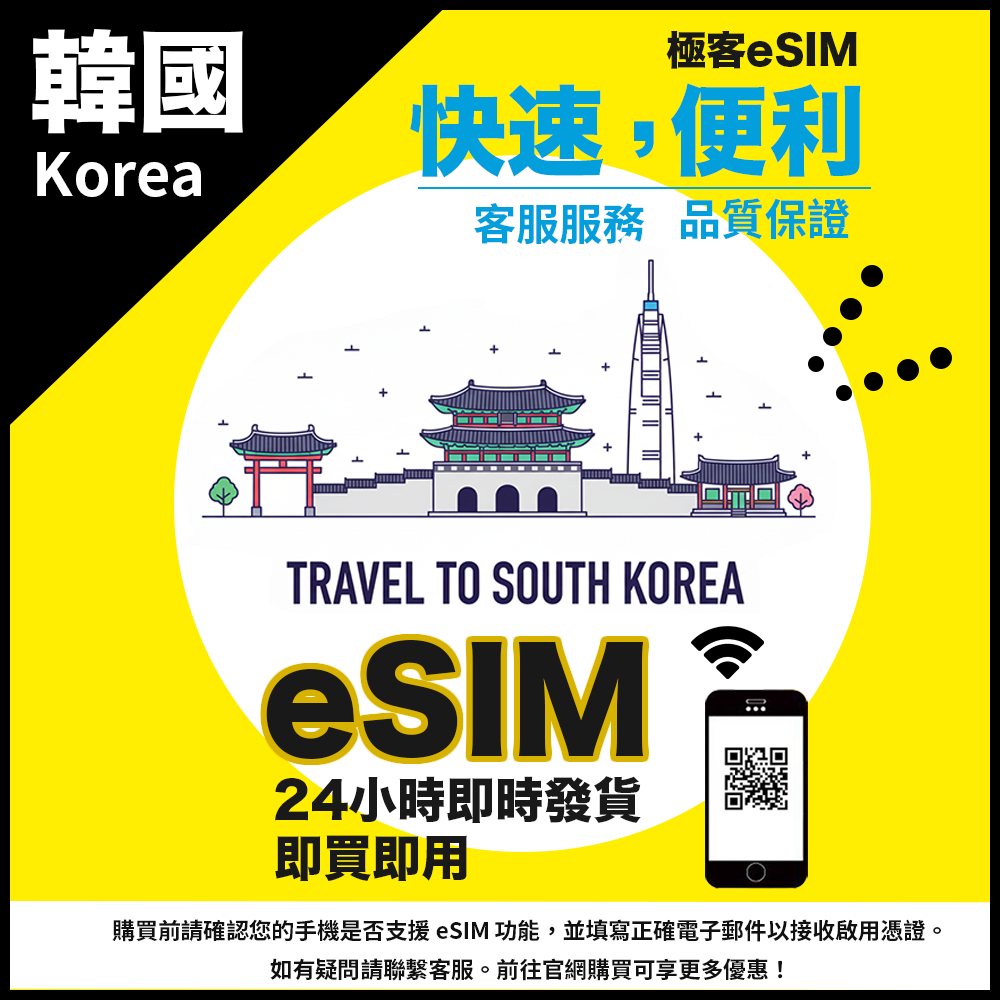
<style>
.page{position:relative;width:1000px;height:1000px;background:#ffee02}
.page>*{position:absolute;margin:0}
.t1{font:109.8px "HiraKakuStdN-W8";color:#ffffff}
.t2{font:40.1px "HiraKakuStdN-W8";color:#191919}
.t3{font:98.2px "HiraKakuStdN-W8";color:#039fdc}
.t4{font:59.4px "SourceHanSansTC-Bold";color:#ffffff}
.t5{font:43.1px "SourceHanSansTC-Bold";color:#039fdc}
.t6{font:137.6px "HiraKakuStdN-W8";color:#191919}
.t7{font:48.9px "HiraKakuStdN-W8";color:#191919}
.t8{font:22.7px "SourceHanSansTC-Bold";color:#101010}
</style>
<div class="page">
<p class="t1" style="left:32px;top:29px;width:211px;height:105px">韓國</p>
<p class="t2" style="left:666px;top:31px;width:191px;height:38px">極客eSIM</p>
<p class="t3" style="left:410px;top:83px;width:451px;height:95px">快速  便利</p>
<p class="t3" style="left:634px;top:121px;width:20px;height:37px">,</p>
<p class="t4" style="left:37px;top:152px;width:164px;height:45px">Korea</p>
<p class="t5" style="left:681px;top:198px;width:169px;height:42px">品質保證</p>
<p class="t5" style="left:474px;top:202px;width:171px;height:42px">客服服務</p>
<p class="t6" style="left:266px;top:639px;width:378px;height:120px">eSIM</p>
<p class="t7" style="left:275px;top:776px;width:366px;height:47px">24小時即時發貨</p>
<p class="t7" style="left:275px;top:835px;width:192px;height:46px">即買即用</p>
<p class="t8" style="left:112px;top:919px;width:829px;height:62px;text-align:center">購買前請確認您的手機是否支援 eSIM 功能，並填寫正確電子郵件以接收啟用憑證。<br>如有疑問請聯繫客服。前往官網購買可享更多優惠！</p>
</div>
